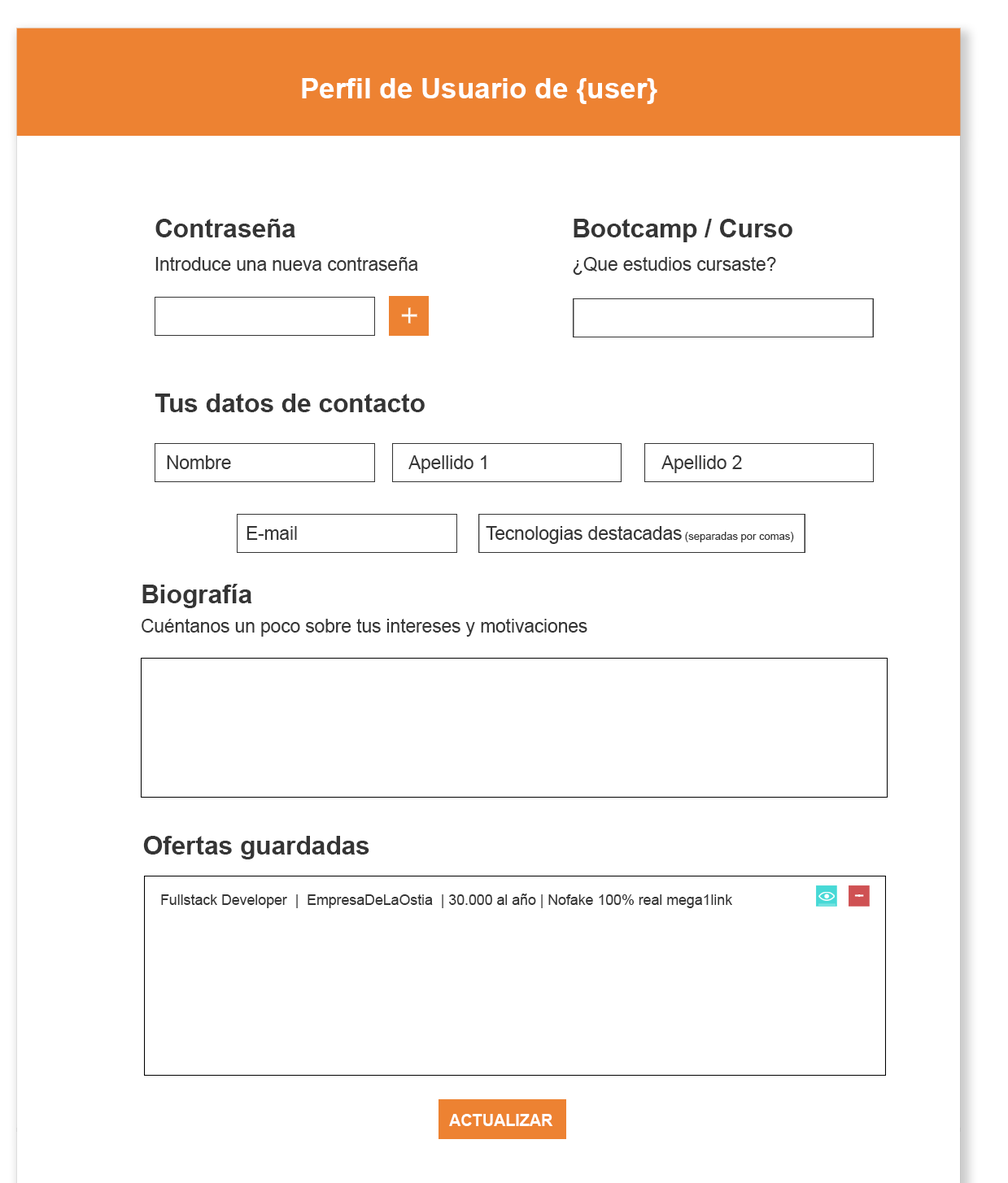
<style>
.page{position:relative;width:1008px;height:1183px;background:#ffffff}
.page>*{position:absolute;margin:0}
.t1{font:28.5px "Arial-BoldMT";color:#ffffff}
.t2{font:25.7px "Arial-BoldMT";color:#353535}
.t3{font:18.4px "ArialMT";color:#353535}
.t4{font:10.6px "ArialMT";color:#353535}
.t5{font:14.4px "ArialMT";color:#353535}
.t6{font:16.1px "Arial-BoldMT";color:#ffffff}
</style>
<div class="page">
<p class="t1" style="left:302px;top:78px;width:355px;height:26px">Perfil de Usuario de {user}</p>
<p class="t2" style="left:155px;top:219px;width:140px;height:18px">Contraseña</p>
<p class="t2" style="left:573px;top:219px;width:219px;height:23px">Bootcamp / Curso</p>
<p class="t3" style="left:155px;top:257px;width:263px;height:14px">Introduce una nueva contraseña</p>
<p class="t3" style="left:573px;top:257px;width:203px;height:18px">¿Que estudios cursaste?</p>
<p class="t2" style="left:155px;top:394px;width:270px;height:18px">Tus datos de contacto</p>
<p class="t3" style="left:167px;top:455px;width:64px;height:14px">Nombre</p>
<p class="t3" style="left:408px;top:455px;width:78px;height:18px">Apellido 1</p>
<p class="t3" style="left:661px;top:455px;width:81px;height:18px">Apellido 2</p>
<p class="t3" style="left:246px;top:526px;width:51px;height:14px">E-mail</p>
<p class="t3" style="left:486px;top:526px;width:308px;height:18px">Tecnologias destacadas<span class="t4"> (separadas por comas)</span></p>
<p class="t2" style="left:142px;top:584px;width:110px;height:24px">Biografía</p>
<p class="t3" style="left:142px;top:619px;width:445px;height:18px">Cuéntanos un poco sobre tus intereses y motivaciones</p>
<p class="t2" style="left:143px;top:836px;width:226px;height:24px">Ofertas guardadas</p>
<p class="t5" style="left:161px;top:894px;width:571px;height:14px">Fullstack Developer  |  EmpresaDeLaOstia  | 30.000 al año | Nofake 100% real mega1link</p>
<p class="t6" style="left:449px;top:1114px;width:104px;height:12px">ACTUALIZAR</p>
</div>
